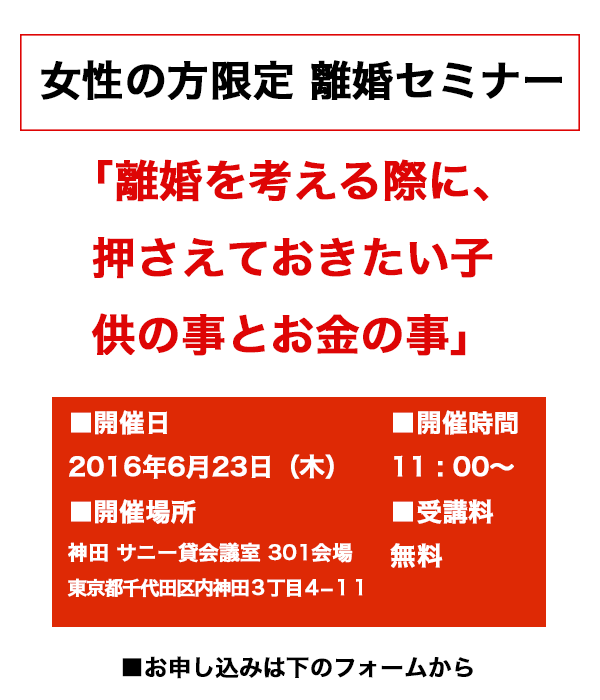
<style>
.page{position:relative;width:600px;height:700px;background:#ffffff}
.page>*{position:absolute;margin:0}
.t1{font:41.9px "HiraKakuProN-W6";letter-spacing:-0.01em;color:#000000;font-weight:bold}
.t2{font:44px "HiraKakuProN-W6";letter-spacing:-0.01em;color:#de0505;font-weight:bold}
.t3{font:25.2px "HiraKakuProN-W6";letter-spacing:-0.01em;color:#ffffff;font-weight:bold}
.t4{font:19.2px "HiraKakuProN-W6";letter-spacing:-0.09em;color:#ffffff;font-weight:bold}
.t5{font:20.2px "HiraKakuProN-W6";letter-spacing:-0.01em;color:#ffffff;font-weight:bold}
.t6{font:23.3px "HiraKakuProN-W6";letter-spacing:-0.01em;color:#000000;font-weight:bold}
</style>
<div class="page">
<p class="t1" style="left:41px;top:60px;width:521px;height:40px">女性の方限定 離婚セミナー</p>
<p class="t2" style="left:91px;top:159px;width:402px;height:197px;text-align:center">「離婚を考える際に、<br>押さえておきたい子<br>供の事とお金の事」</p>
<p class="t3" style="left:69px;top:410px;width:265px;height:69px">■開催日<br>2016年6月23日（木）</p>
<p class="t3" style="left:393px;top:410px;width:125px;height:67px">■開催時間<br>11 : 00〜</p>
<p class="t4" style="left:67px;top:499px;width:296px;height:99px"><span class="t3">■開催場所<br></span><span class="t5">神田 サニー貸会議室 301会場<br></span>東京都千代田区内神田３丁目４−１１</p>
<p class="t3" style="left:390px;top:499px;width:104px;height:69px">■受講料<br>無料</p>
<p class="t6" style="left:122px;top:656px;width:351px;height:23px">■お申し込みは下のフォームから</p>
</div>
